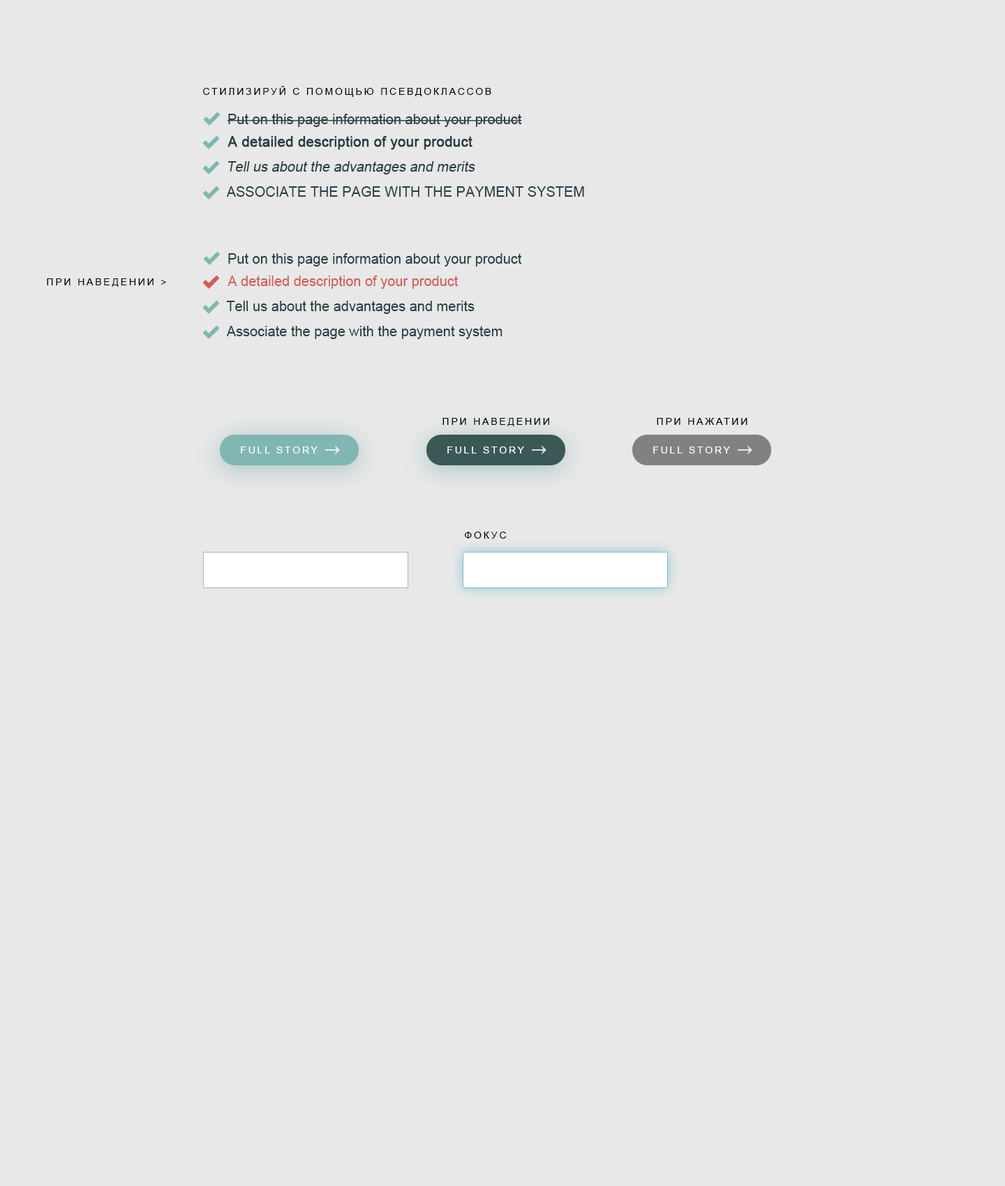
<style>
.page{position:relative;width:1005px;height:1186px;background:#e8e8e8}
.page>*{position:absolute;margin:0}
.t1{font:9.8px "ArialMT";letter-spacing:0.2em;color:#000000;text-transform:uppercase}
.t2{font:14px "ArialMT";color:#273d46}
.t3{font:14px "ArialMT";color:#273d46;font-weight:bold}
.t4{font:14px "ArialMT";color:#273d46;font-style:italic}
.t5{font:14px "ArialMT";color:#273d46;text-transform:uppercase}
.t6{font:14px "ArialMT";color:#d55a5a}
.t7{font:9.8px "ArialMT";letter-spacing:0.2em;color:#ffffff;text-transform:uppercase}
</style>
<div class="page">
<p class="t1" style="left:203px;top:86px;width:288px;height:11px">Стилизируй с помощью псевдоклассов</p>
<p class="t2" style="left:228px;top:114px;width:294px;height:13px">Put on this page information about your product</p>
<p class="t3" style="left:228px;top:136px;width:244px;height:14px">A detailed description of your product</p>
<p class="t4" style="left:228px;top:161px;width:247px;height:13px">Tell us about the advantages and merits</p>
<p class="t5" style="left:226px;top:186px;width:358px;height:11px">Associate the page with the payment system</p>
<p class="t2" style="left:228px;top:253px;width:294px;height:14px">Put on this page information about your product</p>
<p class="t1" style="left:47px;top:278px;width:119px;height:9px">При наведении &gt;</p>
<p class="t6" style="left:228px;top:276px;width:231px;height:13px">A detailed description of your product</p>
<p class="t2" style="left:226px;top:301px;width:249px;height:13px">Tell us about the advantages and merits</p>
<p class="t2" style="left:226px;top:326px;width:277px;height:13px">Associate the page with the payment system</p>
<p class="t1" style="left:442px;top:418px;width:107px;height:8px">При наведении</p>
<p class="t1" style="left:657px;top:418px;width:90px;height:7px">При нажатии</p>
<p class="t7" style="left:241px;top:447px;width:77px;height:7px">Full Story</p>
<p class="t7" style="left:447px;top:447px;width:77px;height:7px">Full Story</p>
<p class="t7" style="left:653px;top:447px;width:77px;height:7px">Full Story</p>
<p class="t1" style="left:465px;top:532px;width:42px;height:7px">Фокус</p>
</div>
